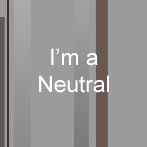
<style>
.page{position:relative;width:147px;height:147px;background:#9c9a9a}
.page>*{position:absolute;margin:0}
.t1{font:22.8px "ArialMT";color:#ffffff}
</style>
<div class="page">
<p class="t1" style="left:39px;top:48px;width:70px;height:45px;text-align:center">I’m a Neutral</p>
</div>
